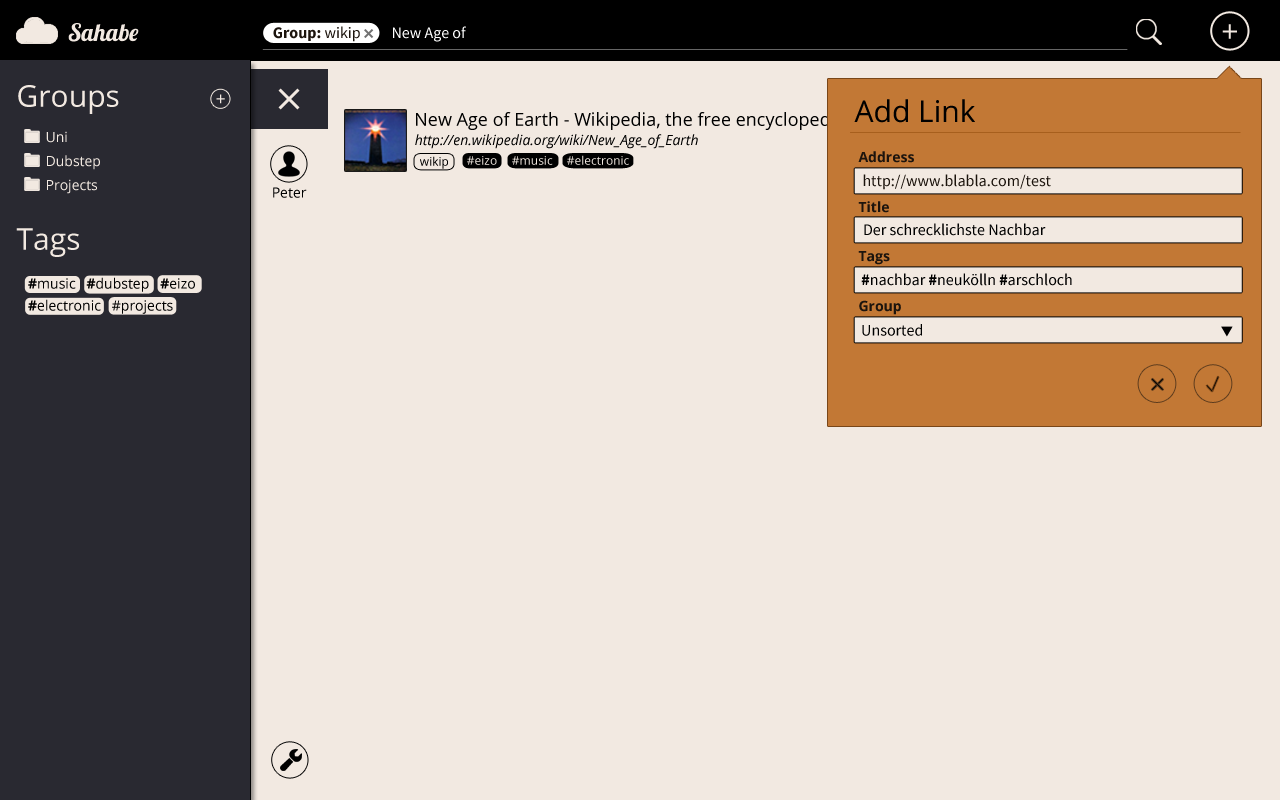
<style>
.page{position:relative;width:1280px;height:800px;background:#f2e9e1}
.page>*{position:absolute;margin:0}
.t1{font:24px "Lobster";color:#f2e9e1}
.t2{font:16px "SourceSansPro-Bold";color:#1c140d}
.t3{font:16px "SourceSansPro-Regular";color:#1c140d}
.t4{font:16px "SourceSansPro-Regular";color:#ffffff}
.t5{font:30px "OpenSans";color:#f2e9e1}
.t6{font:18px "OpenSans";color:#f2e9e1}
.t7{font:30px "OpenSans";color:#000000}
.t8{font:18px "OpenSans";color:#000000}
.t9{font:14px "OpenSans";color:#f2e9e1}
.t10{font:14px "OpenSans-Italic";color:#000000}
.t11{font:12px "OpenSans";color:#000000}
.t12{font:12px "OpenSans"}
.t13{font:12px "OpenSans";color:#f2e9e1}
.t14{font:14px "OpenSans-Bold";color:#1c140d}
.t15{font:14px "OpenSans";color:#000000}
.t16{font:16px "SourceSansPro-Regular";color:#000000}
.t17{font:14px/22px "OpenSans";color:#000000}
.t18{font:14px/22px "OpenSans-Bold";color:#000000}
.t19{font:16px "SourceSansPro-Bold";color:#000000}
</style>
<div class="page">
<p class="t1" style="left:68px;top:23px;width:71px;height:19px">Sahabe</p>
<p class="t2" style="left:273px;top:26px;width:87px;height:16px">Group: <span class="t3">wikip</span></p>
<p class="t4" style="left:393px;top:26px;width:73px;height:16px">New Age of</p>
<p class="t5" style="left:1222px;top:24px;width:15px;height:15px">+</p>
<p class="t5" style="left:18px;top:85px;width:101px;height:29px">Groups</p>
<p class="t6" style="left:216px;top:94px;width:9px;height:10px">+</p>
<p class="t7" style="left:854px;top:99px;width:121px;height:24px">Add Link</p>
<p class="t8" style="left:416px;top:112px;width:428px;height:18px">New Age of Earth - Wikipedia, the free encyclopedia</p>
<p class="t9" style="left:46px;top:131px;width:21px;height:12px">Uni</p>
<p class="t10" style="left:415px;top:134px;width:283px;height:15px">http://en.wikipedia.org/wiki/New_Age_of_Earth</p>
<p class="t9" style="left:47px;top:155px;width:53px;height:15px">Dubstep</p>
<p class="t11" style="left:420px;top:156px;width:28px;height:13px">wikip</p>
<p class="t12" style="left:467px;top:156px;width:30px;height:9px">#eizo</p>
<p class="t13" style="left:512px;top:156px;width:41px;height:9px">#music</p>
<p class="t13" style="left:567px;top:155px;width:62px;height:10px">#electronic</p>
<p class="t14" style="left:858px;top:151px;width:56px;height:12px">Address</p>
<p class="t3" style="left:863px;top:174px;width:188px;height:16px">http://www.blabla.com/test</p>
<p class="t9" style="left:47px;top:179px;width:50px;height:15px">Projects</p>
<p class="t15" style="left:273px;top:187px;width:34px;height:11px">Peter</p>
<p class="t14" style="left:858px;top:201px;width:31px;height:12px">Title</p>
<p class="t5" style="left:16px;top:228px;width:64px;height:29px">Tags</p>
<p class="t16" style="left:864px;top:223px;width:182px;height:13px">Der schrecklichste Nachbar</p>
<p class="t14" style="left:858px;top:251px;width:32px;height:14px">Tags</p>
<p class="t17" style="left:28px;top:277px;width:167px;height:37px"><span class="t18">#</span>music   <span class="t18">#</span>dubstep   <span class="t18">#</span>eizo <span class="t18">#</span>electronic   #projects</p>
<p class="t16" style="left:861px;top:273px;width:211px;height:13px"><span class="t19">#</span>nachbar <span class="t19">#</span>neukölln <span class="t19">#</span>arschloch</p>
<p class="t14" style="left:859px;top:300px;width:42px;height:15px">Group</p>
<p class="t16" style="left:862px;top:324px;width:60px;height:12px">Unsorted</p>
</div>
